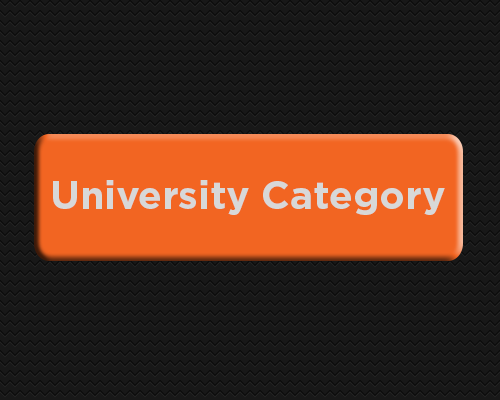
<style>
.page{position:relative;width:500px;height:400px;background:#181818}
.page>*{position:absolute;margin:0}
.t1{font:39.3px "Gotham-Bold";color:#d8d8d8}
</style>
<div class="page">
<p class="t1" style="left:53px;top:180px;width:392px;height:35px">University Category</p>
</div>
